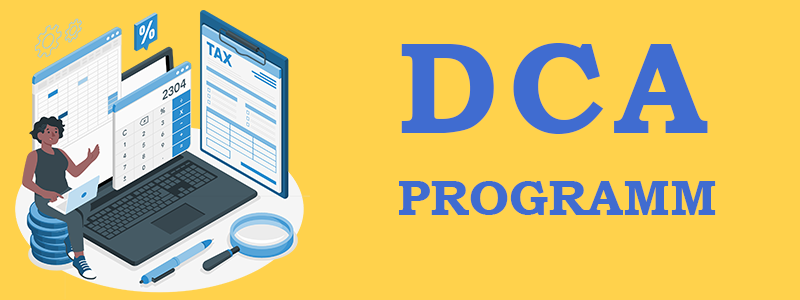
<style>
.page{position:relative;width:800px;height:300px;background:#ffd24c}
.page>*{position:absolute;margin:0}
.t1{font:130px "BookmanOldStyle-Bold";color:#406cd0}
.t2{font:50px "BookmanOldStyle-Bold";color:#406cd0}
</style>
<div class="page">
<p class="t1" style="left:401px;top:43px;width:307px;height:91px">D    C   A</p>
<p class="t2" style="left:399px;top:181px;width:317px;height:34px">PROGRAMMING</p>
</div>
